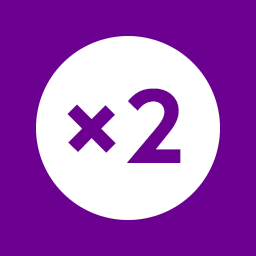
<style>
.page{position:relative;width:256px;height:256px;background:#6c0090}
.page>*{position:absolute;margin:0}
.t1{font:91.4px "KeepCalm-Medium";letter-spacing:0.025em;color:#6c0090}
</style>
<div class="page">
<p class="t1" style="left:67px;top:88px;width:114px;height:75px">×2</p>
</div>
